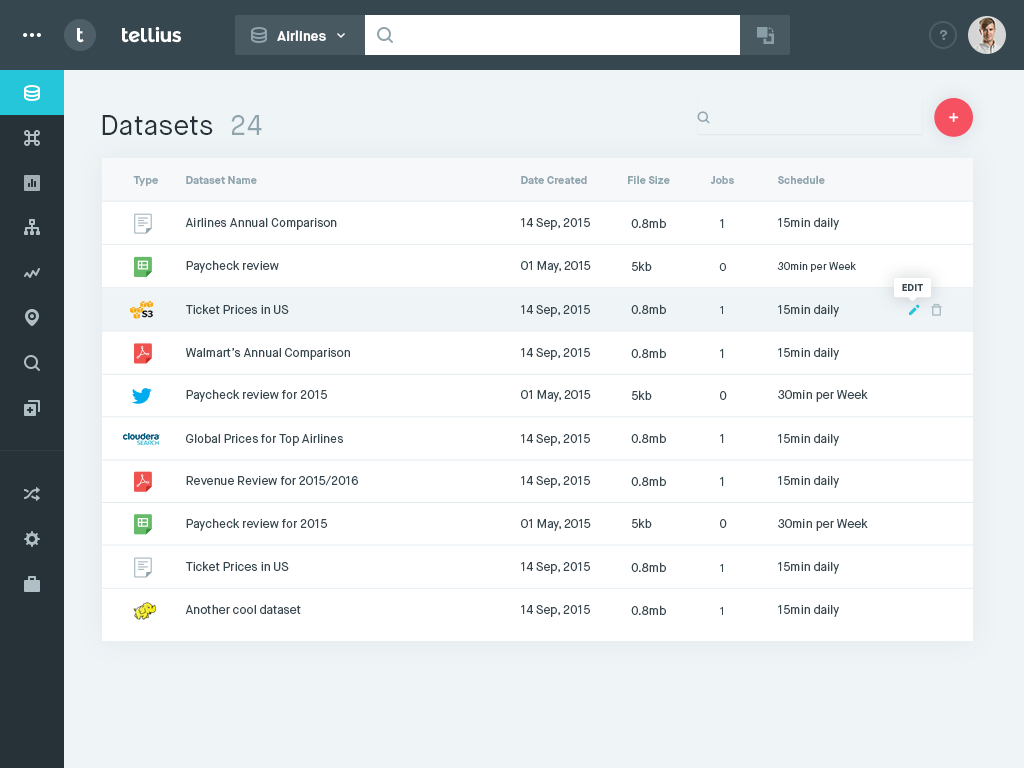
<style>
.page{position:relative;width:1024px;height:768px;background:#ffffff}
.page>*{position:absolute;margin:0}
.t1{font:20px "MontserratAlternates-Bold";letter-spacing:-0.04em;color:#ffffff}
.t2{font:14px "MaisonNeue-Bold";color:#ffffff}
.t3{font:14px "MaisonNeue-Bold";color:#78909c}
.t4{font:28px "MaisonNeue-Book";color:#263238}
.t5{font:28px "MaisonNeue-Book";color:#90a4ae}
.t6{font:11px "MaisonNeue-Bold";color:#90a4ae}
.t7{font:12px "MaisonNeue-Book";color:#37474f}
.t8{font:10.4px "MaisonNeue-Book";color:#37474f}
.t9{font:10px "MaisonNeue-Bold";color:#37474f;text-transform:uppercase}
</style>
<div class="page">
<p class="t1" style="left:77px;top:28px;width:7px;height:15px">t</p>
<p class="t1" style="left:122px;top:26px;width:59px;height:17px">tellius</p>
<p class="t2" style="left:277px;top:30px;width:49px;height:11px">Airlines</p>
<p class="t3" style="left:939px;top:30px;width:9px;height:10px">?</p>
<p class="t4" style="left:102px;top:115px;width:111px;height:20px">Datasets</p>
<p class="t5" style="left:231px;top:115px;width:31px;height:20px">24</p>
<p class="t6" style="left:133px;top:176px;width:25px;height:10px">Type</p>
<p class="t6" style="left:186px;top:176px;width:71px;height:8px">Dataset Name</p>
<p class="t6" style="left:521px;top:176px;width:66px;height:8px">Date Created</p>
<p class="t6" style="left:628px;top:175px;width:42px;height:9px">File Size</p>
<p class="t6" style="left:710px;top:176px;width:24px;height:8px">Jobs</p>
<p class="t6" style="left:778px;top:175px;width:47px;height:9px">Schedule</p>
<p class="t7" style="left:185px;top:218px;width:152px;height:12px">Airlines Annual Comparison</p>
<p class="t7" style="left:521px;top:218px;width:69px;height:12px">14 Sep, 2015</p>
<p class="t7" style="left:631px;top:218px;width:35px;height:10px">0.8mb</p>
<p class="t7" style="left:720px;top:219px;width:4px;height:9px">1</p>
<p class="t7" style="left:778px;top:217px;width:61px;height:13px">15min daily</p>
<p class="t7" style="left:186px;top:260px;width:93px;height:13px">Paycheck review</p>
<p class="t7" style="left:521px;top:261px;width:70px;height:12px">01 May, 2015</p>
<p class="t7" style="left:631px;top:261px;width:21px;height:10px">5kb</p>
<p class="t8" style="left:719px;top:263px;width:7px;height:8px">0</p>
<p class="t8" style="left:777px;top:261px;width:79px;height:11px">30min per Week</p>
<p class="t9" style="left:902px;top:284px;width:21px;height:7px">Edit</p>
<p class="t7" style="left:186px;top:304px;width:103px;height:10px">Ticket Prices in US</p>
<p class="t7" style="left:521px;top:305px;width:69px;height:12px">14 Sep, 2015</p>
<p class="t7" style="left:631px;top:304px;width:35px;height:10px">0.8mb</p>
<p class="t7" style="left:778px;top:304px;width:61px;height:13px">15min daily</p>
<p class="t8" style="left:720px;top:306px;width:3px;height:8px">1</p>
<p class="t7" style="left:186px;top:348px;width:164px;height:12px">Walmart’s Annual Comparison</p>
<p class="t7" style="left:521px;top:348px;width:69px;height:12px">14 Sep, 2015</p>
<p class="t7" style="left:631px;top:348px;width:35px;height:10px">0.8mb</p>
<p class="t7" style="left:720px;top:349px;width:4px;height:9px">1</p>
<p class="t7" style="left:778px;top:347px;width:61px;height:13px">15min daily</p>
<p class="t7" style="left:186px;top:389px;width:141px;height:13px">Paycheck review for 2015</p>
<p class="t7" style="left:521px;top:390px;width:70px;height:12px">01 May, 2015</p>
<p class="t7" style="left:631px;top:390px;width:21px;height:10px">5kb</p>
<p class="t7" style="left:778px;top:389px;width:90px;height:13px">30min per Week</p>
<p class="t7" style="left:720px;top:391px;width:7px;height:9px">0</p>
<p class="t7" style="left:186px;top:433px;width:157px;height:13px">Global Prices for Top Airlines</p>
<p class="t7" style="left:521px;top:434px;width:69px;height:12px">14 Sep, 2015</p>
<p class="t7" style="left:631px;top:433px;width:35px;height:10px">0.8mb</p>
<p class="t7" style="left:720px;top:434px;width:4px;height:9px">1</p>
<p class="t7" style="left:778px;top:433px;width:61px;height:13px">15min daily</p>
<p class="t7" style="left:186px;top:475px;width:172px;height:11px">Revenue Review for 2015/2016</p>
<p class="t7" style="left:521px;top:476px;width:69px;height:12px">14 Sep, 2015</p>
<p class="t7" style="left:631px;top:476px;width:35px;height:10px">0.8mb</p>
<p class="t7" style="left:720px;top:477px;width:4px;height:9px">1</p>
<p class="t7" style="left:778px;top:475px;width:61px;height:13px">15min daily</p>
<p class="t7" style="left:186px;top:518px;width:141px;height:13px">Paycheck review for 2015</p>
<p class="t7" style="left:521px;top:519px;width:70px;height:12px">01 May, 2015</p>
<p class="t7" style="left:631px;top:518px;width:21px;height:10px">5kb</p>
<p class="t7" style="left:720px;top:519px;width:7px;height:9px">0</p>
<p class="t7" style="left:778px;top:518px;width:90px;height:13px">30min per Week</p>
<p class="t7" style="left:186px;top:561px;width:103px;height:10px">Ticket Prices in US</p>
<p class="t7" style="left:521px;top:562px;width:69px;height:12px">14 Sep, 2015</p>
<p class="t7" style="left:631px;top:562px;width:35px;height:10px">0.8mb</p>
<p class="t8" style="left:720px;top:564px;width:3px;height:8px">1</p>
<p class="t7" style="left:778px;top:561px;width:61px;height:13px">15min daily</p>
<p class="t7" style="left:185px;top:604px;width:116px;height:10px">Another cool dataset</p>
<p class="t7" style="left:521px;top:605px;width:69px;height:12px">14 Sep, 2015</p>
<p class="t7" style="left:631px;top:605px;width:35px;height:10px">0.8mb</p>
<p class="t7" style="left:778px;top:604px;width:61px;height:13px">15min daily</p>
<p class="t8" style="left:720px;top:607px;width:3px;height:8px">1</p>
</div>
